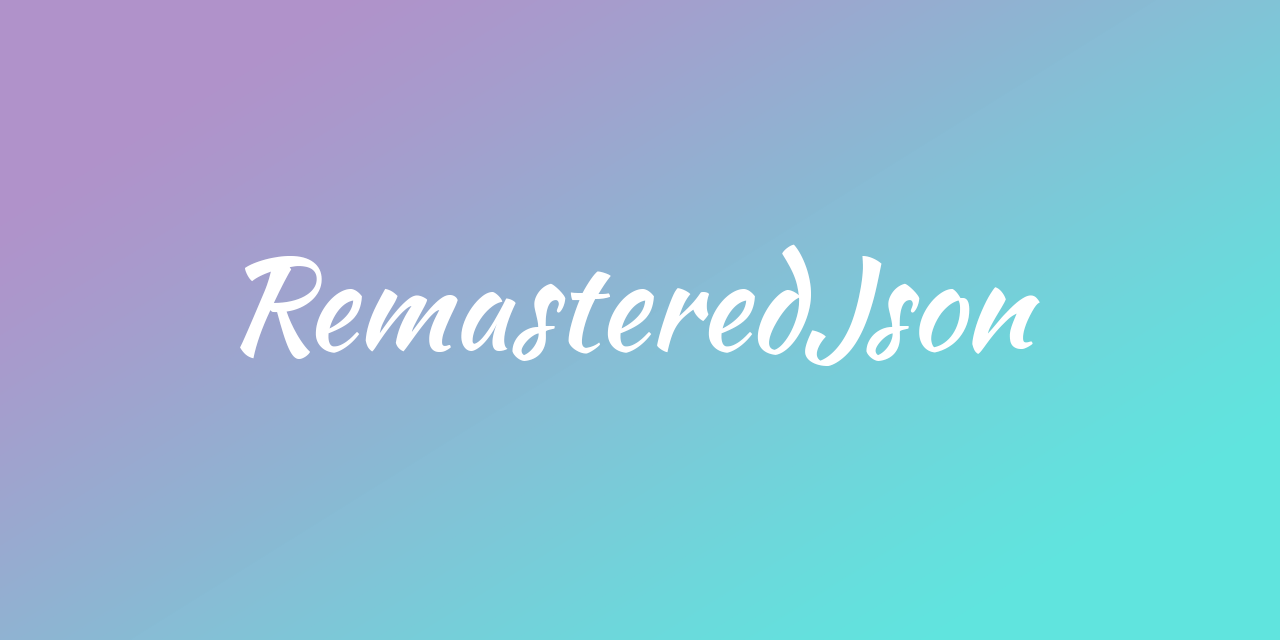
<style>
.page{position:relative;width:1280px;height:640px}
.page>*{position:absolute;margin:0}
.t1{font:125px "KaushanScript-Regular";color:#ffffff}
</style>
<div class="page">
<p class="t1" style="left:240px;top:244px;width:800px;height:122px">RemasteredJson</p>
</div>
